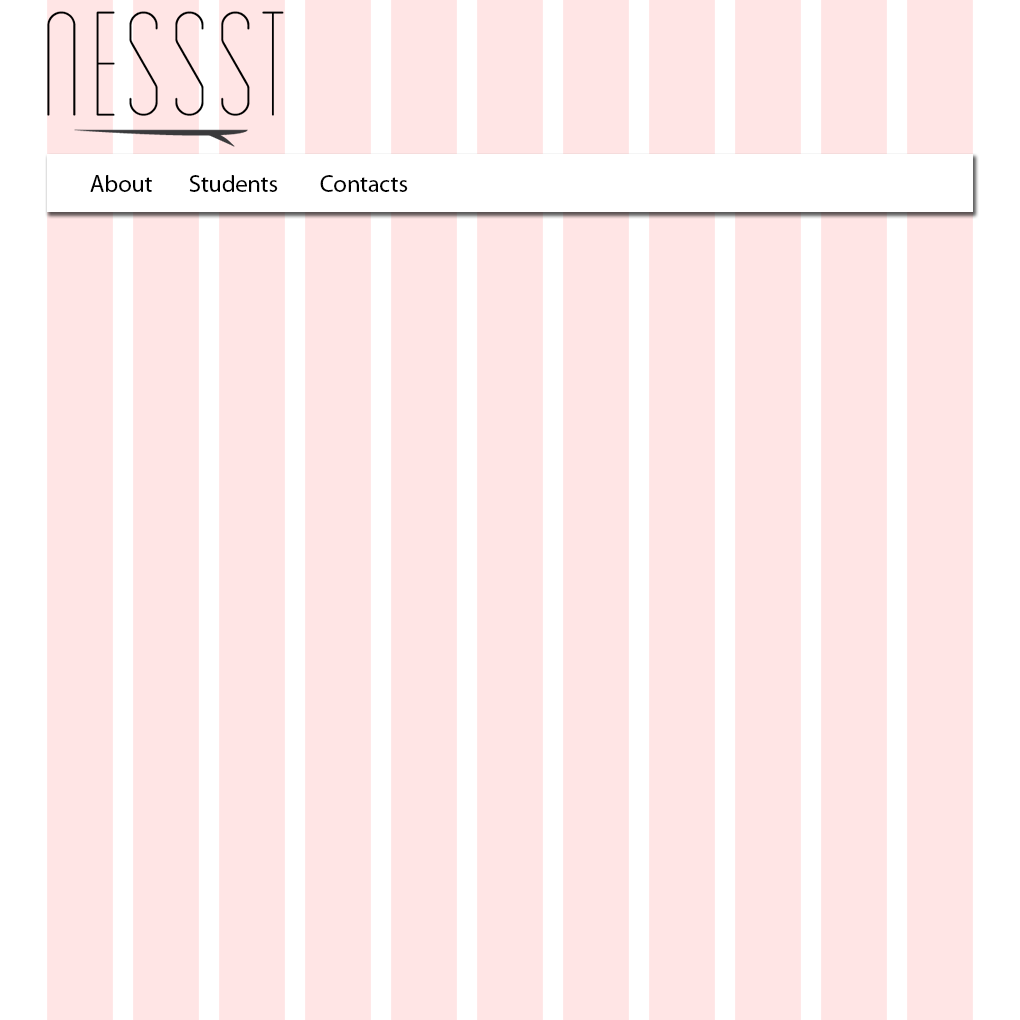
<style>
.page{position:relative;width:1020px;height:1020px;background:#ffe5e5}
.page>*{position:absolute;margin:0}
.t1{font:24px "MyriadPro-Regular";color:#000000}
</style>
<div class="page">
<p class="t1" style="left:90px;top:175px;width:62px;height:17px">About</p>
<p class="t1" style="left:189px;top:175px;width:89px;height:17px">Students</p>
<p class="t1" style="left:320px;top:175px;width:88px;height:17px">Contacts</p>
</div>
